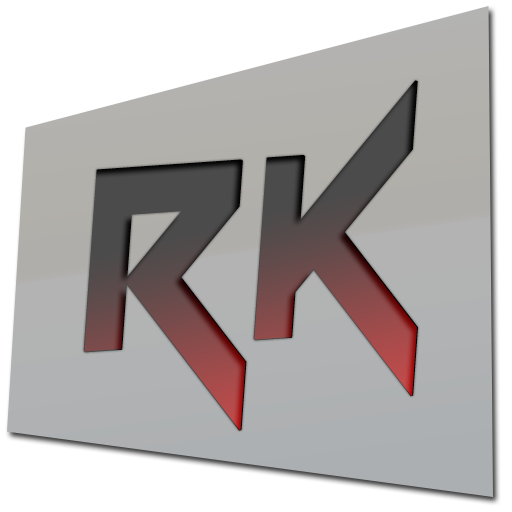
<style>
.page{position:relative;width:512px;height:512px;background:#ffffff}
.page>*{position:absolute;margin:0}
.t1{font:357.8px "Vermin-Vibes";font-weight:bold;font-style:italic;scale:0.8 1}
</style>
<div class="page">
<p class="t1" style="left:83px;top:80px;width:335px;height:351px;rotate:-4deg">RK</p>
<p class="t1" style="left:84px;top:81px;width:333px;height:350px;rotate:-4deg">RK</p>
</div>
